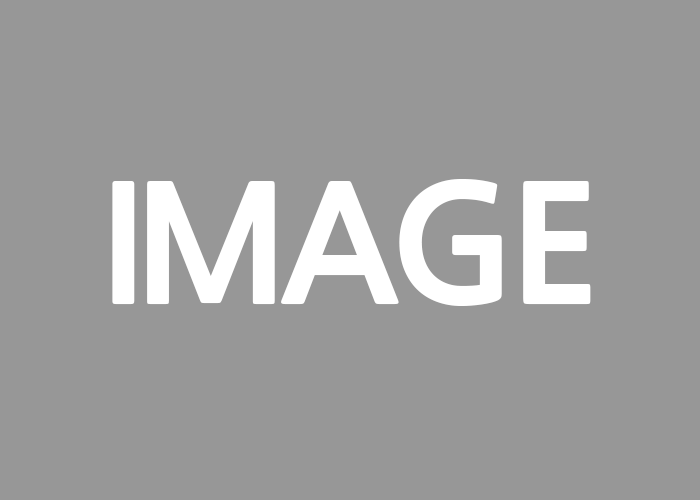
<style>
.page{position:relative;width:700px;height:500px;background:#979797}
.page>*{position:absolute;margin:0}
.t1{font:160px "NanumGothicExtraBold";letter-spacing:-0.05em;color:#ffffff;text-transform:uppercase}
</style>
<div class="page">
<p class="t1" style="left:112px;top:179px;width:479px;height:127px">IMAGE</p>
</div>
